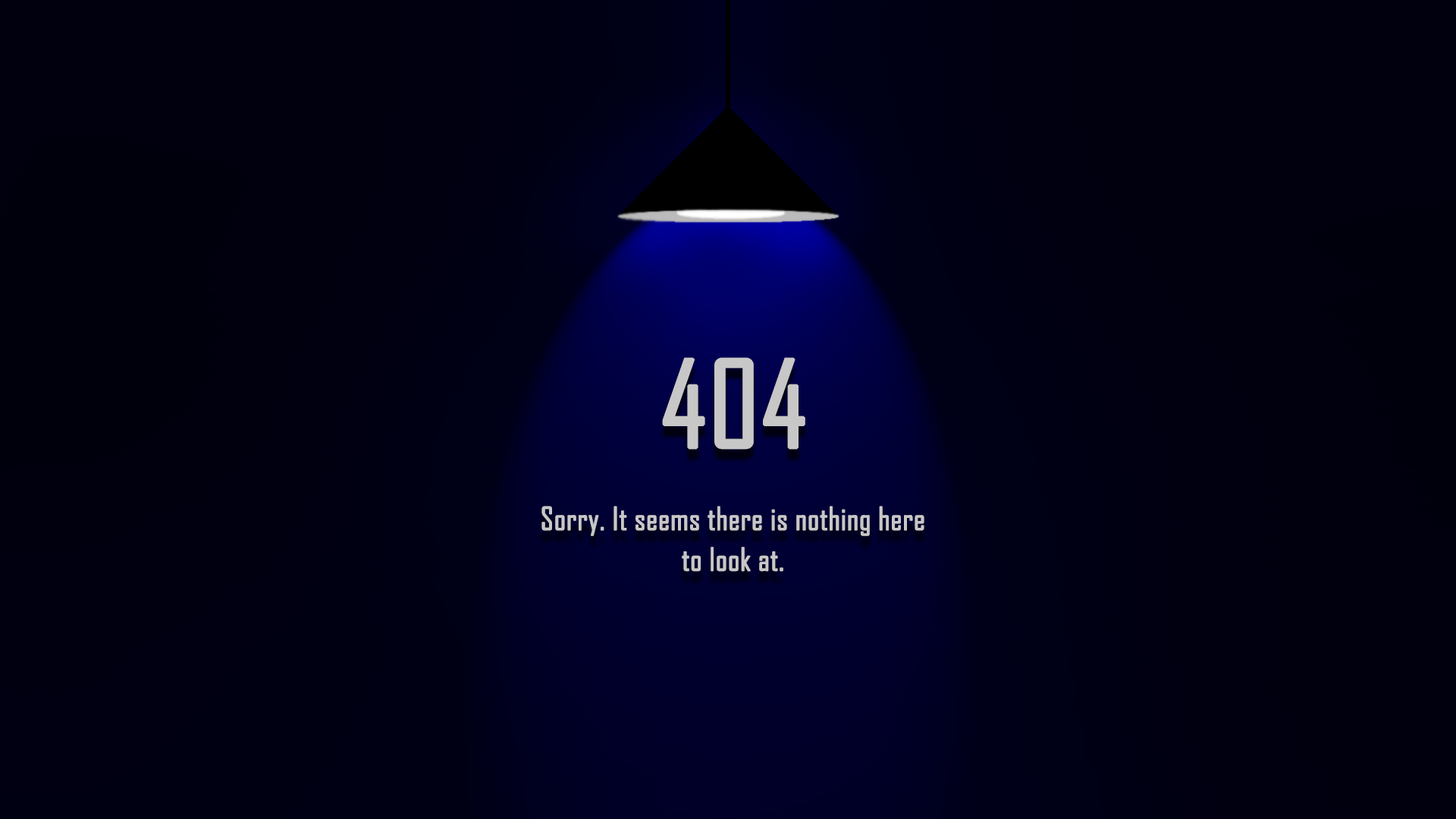
<style>
.page{position:relative;width:1456px;height:819px}
.page>*{position:absolute;margin:0}
.t1{font:115.3px "AgencyFB-Reg";color:#c8c7c7;font-weight:bold}
.t2{font:30.4px "AgencyFB-Reg";color:#c8c7c7;font-weight:bold}
</style>
<div class="page">
<p class="t1" style="left:662px;top:357px;width:143px;height:93px">404</p>
<p class="t2" style="left:541px;top:506px;width:383px;height:66px;text-align:center">Sorry. It seems there is nothing here<br>to look at.</p>
</div>
